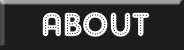
<style>
.page{position:relative;width:184px;height:50px;background:#1c1c1c}
.page>*{position:absolute;margin:0}
.t1{font:33.3px "AdamGorry-Lights";color:#ffffff}
</style>
<div class="page">
<p class="t1" style="left:42px;top:12px;width:108px;height:25px">About</p>
</div>
